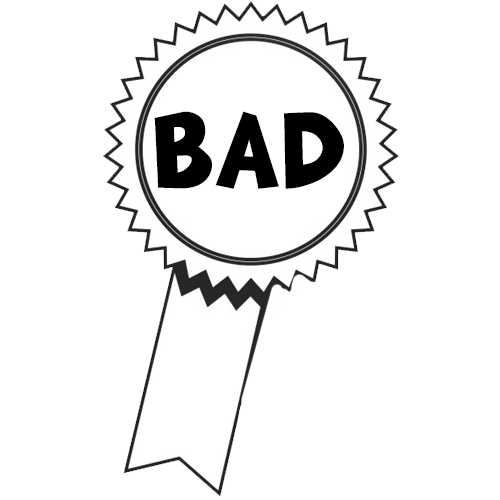
<style>
.page{position:relative;width:500px;height:500px;background:#ffffff}
.page>*{position:absolute;margin:0}
.t1{font:99.3px "THEMINION";color:#000000}
</style>
<div class="page">
<p class="t1" style="left:154px;top:111px;width:190px;height:78px">Bad</p>
</div>
